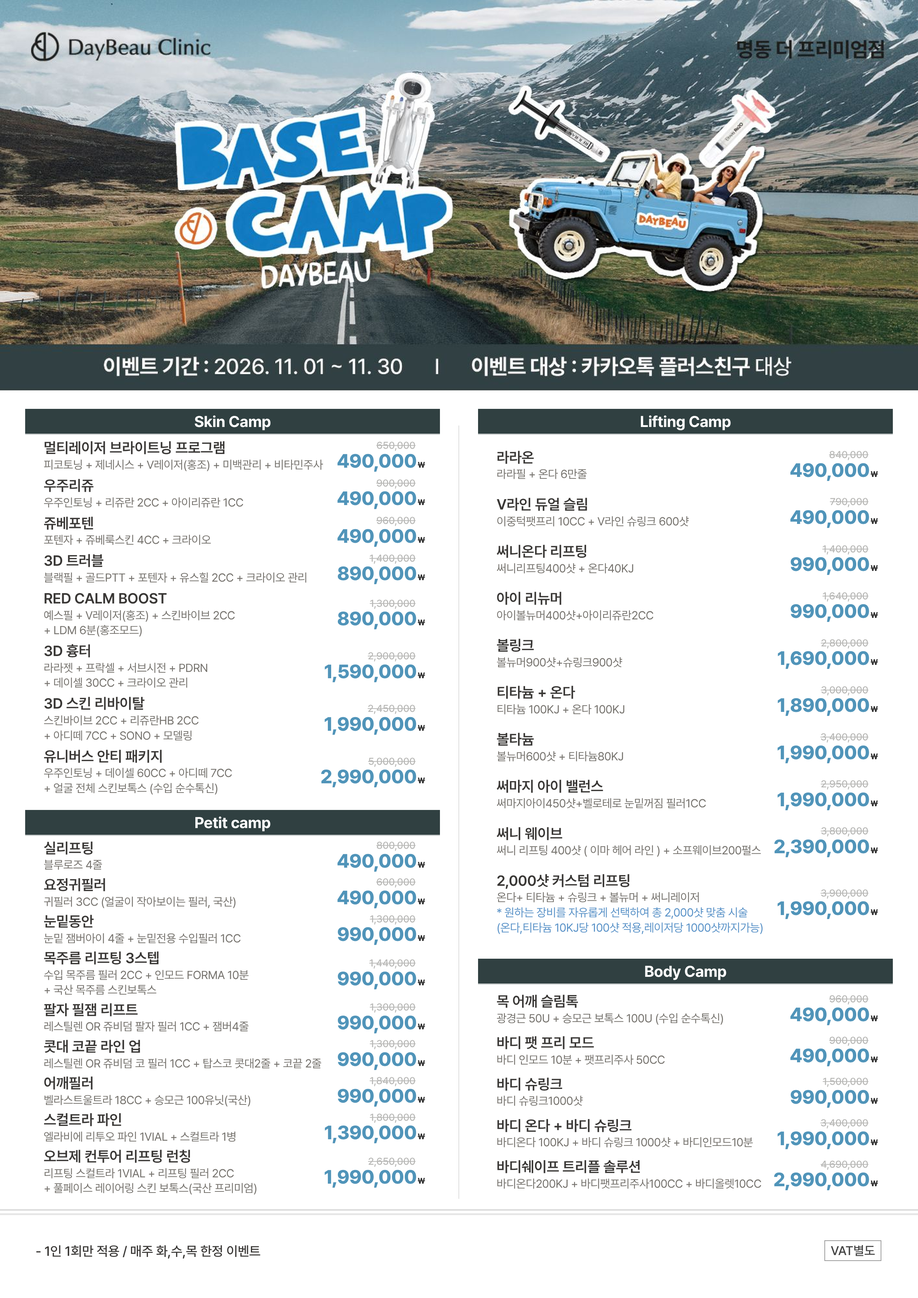
<style>
.page{position:relative;width:918px;height:1298px;background:#ffffff}
.page>*{position:absolute;margin:0}
.t1{font:15.5px "Pretendard-Bold";letter-spacing:-0.012em;color:#ffffff}
.t2{font:14.7px "Pretendard-SemiBold";letter-spacing:-0.01em;color:#3a3836}
.t3{font:10px "Pretendard-Medium";color:#b9b9b7}
.t4{font:19.2px "Pretendard-ExtraBold";letter-spacing:-0.019em;color:#5094b9}
.t5{font:8.1px "Pretendard-ExtraBold";color:#2d2d2d}
.t6{font:11.6px "Pretendard-Regular";letter-spacing:-0.019em;color:#77746f}
.t7{font:11.6px/15px "Pretendard-Regular";letter-spacing:-0.019em;color:#77746f}
.t8{font:11.6px/15px "Pretendard-Regular";letter-spacing:-0.019em;color:#5b93c8}
.t9{font:13.3px/20.7px "Pretendard-Medium";letter-spacing:-0.008em;color:#3a3836}
.t10{font:12.6px "Pretendard-Medium";color:#444444}
</style>
<div class="page">
<p class="t1" style="left:192px;top:410px;width:82px;height:23px">Skin Camp</p>
<p class="t1" style="left:638px;top:410px;width:96px;height:23px">Lifting Camp</p>
<p class="t2" style="left:41px;top:436px;width:290px;height:24px">멀티레이저 브라이트닝 프로그램</p>
<p class="t3" style="left:335px;top:438px;width:83px;height:15px">650,000</p>
<p class="t4" style="left:335px;top:449px;width:93px;height:25px">490,000<span class="t5">₩</span></p>
<p class="t2" style="left:495px;top:446px;width:289px;height:23px">라라온</p>
<p class="t3" style="left:788px;top:447px;width:83px;height:16px">840,000</p>
<p class="t6" style="left:41px;top:455px;width:290px;height:20px">피코토닝 + 제네시스 + V레이저(홍조) + 미백관리 + 비타민주사</p>
<p class="t4" style="left:788px;top:458px;width:93px;height:25px">490,000<span class="t5">₩</span></p>
<p class="t7" style="left:495px;top:465px;width:289px;height:20px">라라필 + 온다 6만줄</p>
<p class="t2" style="left:41px;top:474px;width:290px;height:23px">우주리쥬</p>
<p class="t3" style="left:335px;top:475px;width:83px;height:16px">900,000</p>
<p class="t7" style="left:41px;top:493px;width:290px;height:20px">우주인토닝 + 리쥬란 2CC + 아이리쥬란 1CC</p>
<p class="t4" style="left:335px;top:486px;width:93px;height:25px">490,000<span class="t5">₩</span></p>
<p class="t2" style="left:495px;top:493px;width:289px;height:23px">V라인 듀얼 슬림</p>
<p class="t3" style="left:788px;top:494px;width:83px;height:16px">790,000</p>
<p class="t4" style="left:788px;top:505px;width:93px;height:25px">490,000<span class="t5">₩</span></p>
<p class="t2" style="left:41px;top:512px;width:290px;height:23px">쥬베포텐</p>
<p class="t3" style="left:335px;top:513px;width:83px;height:16px">960,000</p>
<p class="t7" style="left:495px;top:512px;width:289px;height:20px">이중턱팻프리 10CC + V라인 슈링크 600샷</p>
<p class="t6" style="left:41px;top:530px;width:290px;height:20px">포텐자 + 쥬베룩스킨 4CC + 크라이오</p>
<p class="t4" style="left:335px;top:524px;width:93px;height:25px">490,000<span class="t5">₩</span></p>
<p class="t2" style="left:495px;top:540px;width:289px;height:23px">써니온다 리프팅</p>
<p class="t3" style="left:788px;top:541px;width:83px;height:16px">1,400,000</p>
<p class="t2" style="left:41px;top:549px;width:290px;height:24px">3D 트러블</p>
<p class="t3" style="left:335px;top:550px;width:83px;height:16px">1,400,000</p>
<p class="t4" style="left:788px;top:552px;width:93px;height:25px">990,000<span class="t5">₩</span></p>
<p class="t7" style="left:41px;top:568px;width:290px;height:20px">블랙필 + 골드PTT + 포텐자 + 유스힐 2CC + 크라이오 관리</p>
<p class="t4" style="left:335px;top:562px;width:93px;height:25px">890,000<span class="t5">₩</span></p>
<p class="t7" style="left:495px;top:559px;width:289px;height:20px">써니리프팅400샷 + 온다40KJ</p>
<p class="t2" style="left:41px;top:587px;width:290px;height:23px">RED CALM BOOST</p>
<p class="t2" style="left:495px;top:587px;width:289px;height:23px">아이 리뉴머</p>
<p class="t3" style="left:788px;top:588px;width:83px;height:16px">1,640,000</p>
<p class="t7" style="left:41px;top:606px;width:290px;height:34px">예스필 + V레이저(홍조) + 스킨바이브 2CC<br>+ LDM 6분(홍조모드)</p>
<p class="t3" style="left:335px;top:596px;width:83px;height:15px">1,300,000</p>
<p class="t7" style="left:495px;top:606px;width:289px;height:20px">아이볼뉴머400샷+아이리쥬란2CC</p>
<p class="t4" style="left:788px;top:599px;width:93px;height:25px">990,000<span class="t5">₩</span></p>
<p class="t4" style="left:335px;top:607px;width:93px;height:25px">890,000<span class="t5">₩</span></p>
<p class="t2" style="left:41px;top:640px;width:277px;height:23px">3D 흉터</p>
<p class="t2" style="left:495px;top:634px;width:276px;height:23px">볼링크</p>
<p class="t3" style="left:775px;top:635px;width:96px;height:16px">2,800,000</p>
<p class="t3" style="left:322px;top:648px;width:96px;height:16px">2,900,000</p>
<p class="t7" style="left:495px;top:653px;width:276px;height:20px">볼뉴머900샷+슈링크900샷</p>
<p class="t4" style="left:775px;top:646px;width:106px;height:25px">1,690,000<span class="t5">₩</span></p>
<p class="t7" style="left:41px;top:658px;width:277px;height:35px">라라젯 + 프락셀 + 서브시전 + PDRN<br>+ 데이셀 30CC + 크라이오 관리</p>
<p class="t4" style="left:322px;top:659px;width:106px;height:25px">1,590,000<span class="t5">₩</span></p>
<p class="t2" style="left:495px;top:681px;width:276px;height:23px">티타늄 + 온다</p>
<p class="t3" style="left:775px;top:682px;width:96px;height:16px">3,000,000</p>
<p class="t2" style="left:41px;top:692px;width:277px;height:24px">3D 스킨 리바이탈</p>
<p class="t3" style="left:322px;top:701px;width:96px;height:16px">2,450,000</p>
<p class="t7" style="left:495px;top:700px;width:276px;height:20px">티타늄 100KJ + 온다 100KJ</p>
<p class="t4" style="left:775px;top:693px;width:106px;height:25px">1,890,000<span class="t5">₩</span></p>
<p class="t7" style="left:41px;top:711px;width:277px;height:35px">스킨바이브 2CC + 리쥬란HB 2CC<br>+ 아디떼 7CC + SONO + 모델링</p>
<p class="t4" style="left:322px;top:712px;width:106px;height:25px">1,990,000<span class="t5">₩</span></p>
<p class="t2" style="left:495px;top:728px;width:276px;height:24px">볼타늄</p>
<p class="t3" style="left:775px;top:729px;width:96px;height:16px">3,400,000</p>
<p class="t2" style="left:41px;top:745px;width:273px;height:23px">유니버스 안티 패키지</p>
<p class="t6" style="left:495px;top:747px;width:276px;height:20px">볼뉴머600샷 + 티타늄80KJ</p>
<p class="t4" style="left:775px;top:740px;width:106px;height:25px">1,990,000<span class="t5">₩</span></p>
<p class="t3" style="left:318px;top:754px;width:100px;height:16px">5,000,000</p>
<p class="t7" style="left:41px;top:764px;width:273px;height:34px">우주인토닝 + 데이셀 60CC + 아디떼 7CC<br>+ 얼굴 전체 스킨보톡스 (수입 순수톡신)</p>
<p class="t4" style="left:318px;top:765px;width:110px;height:25px">2,990,000<span class="t5">₩</span></p>
<p class="t2" style="left:495px;top:775px;width:276px;height:24px">써마지 아이 밸런스</p>
<p class="t3" style="left:775px;top:776px;width:96px;height:16px">2,950,000</p>
<p class="t6" style="left:495px;top:794px;width:276px;height:20px">써마지아이450샷+벨로테로 눈밑꺼짐 필러1CC</p>
<p class="t4" style="left:775px;top:787px;width:106px;height:25px">1,990,000<span class="t5">₩</span></p>
<p class="t1" style="left:192px;top:811px;width:81px;height:23px">Petit camp</p>
<p class="t2" style="left:495px;top:822px;width:272px;height:24px">써니 웨이브</p>
<p class="t3" style="left:771px;top:824px;width:100px;height:15px">3,800,000</p>
<p class="t2" style="left:41px;top:837px;width:290px;height:23px">실리프팅</p>
<p class="t3" style="left:335px;top:838px;width:83px;height:16px">800,000</p>
<p class="t6" style="left:495px;top:841px;width:272px;height:20px">써니 리프팅 400샷 ( 이마 헤어 라인 ) + 소프웨이브200펄스</p>
<p class="t4" style="left:771px;top:834px;width:110px;height:25px">2,390,000<span class="t5">₩</span></p>
<p class="t7" style="left:41px;top:855px;width:290px;height:20px">블루로즈 4줄</p>
<p class="t4" style="left:335px;top:849px;width:93px;height:25px">490,000<span class="t5">₩</span></p>
<p class="t2" style="left:495px;top:869px;width:276px;height:24px">2,000샷 커스텀 리프팅</p>
<p class="t2" style="left:41px;top:873px;width:290px;height:24px">요정귀필러</p>
<p class="t3" style="left:335px;top:875px;width:83px;height:16px">600,000</p>
<p class="t7" style="left:41px;top:892px;width:290px;height:20px">귀필러 3CC (얼굴이 작아보이는 필러, 국산)</p>
<p class="t4" style="left:335px;top:886px;width:93px;height:25px">490,000<span class="t5">₩</span></p>
<p class="t6" style="left:495px;top:888px;width:276px;height:20px">온다+ 티타늄 + 슈링크 + 볼뉴머 + 써니레이저</p>
<p class="t3" style="left:775px;top:885px;width:96px;height:16px">3,900,000</p>
<p class="t8" style="left:495px;top:903px;width:276px;height:35px">* 원하는 장비를 자유롭게 선택하여 총 2,000샷 맞춤 시술<br>(온다,티타늄 10KJ당 100샷 적용,레이저당 1000샷까지가능)</p>
<p class="t4" style="left:775px;top:896px;width:106px;height:26px">1,990,000<span class="t5">₩</span></p>
<p class="t2" style="left:41px;top:910px;width:290px;height:24px">눈밑동안</p>
<p class="t3" style="left:335px;top:911px;width:83px;height:16px">1,300,000</p>
<p class="t7" style="left:41px;top:929px;width:290px;height:20px">눈밑 잼버아이 4줄 + 눈밑전용 수입필러 1CC</p>
<p class="t4" style="left:335px;top:922px;width:93px;height:25px">990,000<span class="t5">₩</span></p>
<p class="t2" style="left:41px;top:947px;width:290px;height:23px">목주름 리프팅 3스텝</p>
<p class="t7" style="left:41px;top:965px;width:290px;height:35px">수입 목주름 필러 2CC + 인모드 FORMA 10분<br>+ 국산 목주름 스킨보톡스</p>
<p class="t3" style="left:335px;top:955px;width:83px;height:16px">1,440,000</p>
<p class="t1" style="left:642px;top:960px;width:87px;height:23px">Body Camp</p>
<p class="t4" style="left:335px;top:966px;width:93px;height:26px">990,000<span class="t5">₩</span></p>
<p class="t2" style="left:41px;top:998px;width:290px;height:24px">팔자 필잼 리프트</p>
<p class="t3" style="left:335px;top:1000px;width:83px;height:15px">1,300,000</p>
<p class="t2" style="left:495px;top:990px;width:289px;height:24px">목 어깨 슬림톡</p>
<p class="t3" style="left:788px;top:991px;width:83px;height:16px">960,000</p>
<p class="t4" style="left:335px;top:1011px;width:93px;height:25px">990,000<span class="t5">₩</span></p>
<p class="t6" style="left:495px;top:1009px;width:289px;height:20px">광경근 50U + 승모근 보톡스 100U (수입 순수톡신)</p>
<p class="t4" style="left:788px;top:1002px;width:93px;height:26px">490,000<span class="t5">₩</span></p>
<p class="t7" style="left:41px;top:1017px;width:290px;height:20px">레스틸렌 OR 쥬비덤 팔자 필러 1CC + 잼버4줄</p>
<p class="t2" style="left:41px;top:1035px;width:290px;height:24px">콧대 코끝 라인 업</p>
<p class="t3" style="left:335px;top:1036px;width:83px;height:16px">1,300,000</p>
<p class="t2" style="left:495px;top:1032px;width:289px;height:23px">바디 팻 프리 모드</p>
<p class="t3" style="left:788px;top:1033px;width:83px;height:16px">900,000</p>
<p class="t4" style="left:335px;top:1048px;width:93px;height:24px">990,000<span class="t5">₩</span></p>
<p class="t4" style="left:788px;top:1044px;width:93px;height:25px">490,000<span class="t5">₩</span></p>
<p class="t7" style="left:41px;top:1054px;width:290px;height:20px">레스틸렌 OR 쥬비덤 코 필러 1CC + 탑스코 콧대2줄 + 코끝 2줄</p>
<p class="t7" style="left:495px;top:1050px;width:289px;height:20px">바디 인모드 10분 + 팻프리주사 50CC</p>
<p class="t2" style="left:41px;top:1072px;width:290px;height:23px">어깨필러</p>
<p class="t3" style="left:335px;top:1073px;width:83px;height:16px">1,840,000</p>
<p class="t2" style="left:495px;top:1073px;width:289px;height:23px">바디 슈링크</p>
<p class="t4" style="left:335px;top:1084px;width:93px;height:25px">990,000<span class="t5">₩</span></p>
<p class="t3" style="left:788px;top:1074px;width:83px;height:16px">1,500,000</p>
<p class="t4" style="left:788px;top:1085px;width:93px;height:25px">990,000<span class="t5">₩</span></p>
<p class="t7" style="left:41px;top:1090px;width:290px;height:20px">벨라스트울트라 18CC + 승모근 100유닛(국산)</p>
<p class="t7" style="left:495px;top:1092px;width:289px;height:20px">바디 슈링크1000샷</p>
<p class="t2" style="left:41px;top:1109px;width:277px;height:23px">스컬트라 파인</p>
<p class="t3" style="left:322px;top:1110px;width:96px;height:16px">1,800,000</p>
<p class="t4" style="left:322px;top:1121px;width:106px;height:25px">1,390,000<span class="t5">₩</span></p>
<p class="t2" style="left:495px;top:1114px;width:276px;height:24px">바디 온다 + 바디 슈링크</p>
<p class="t3" style="left:775px;top:1116px;width:96px;height:15px">3,400,000</p>
<p class="t7" style="left:41px;top:1127px;width:277px;height:20px">엘라비에 리투오 파인 1VIAL + 스컬트라 1병</p>
<p class="t6" style="left:495px;top:1133px;width:276px;height:20px">바디온다 100KJ + 바디 슈링크 1000샷 + 바디인모드10분</p>
<p class="t4" style="left:775px;top:1126px;width:106px;height:26px">1,990,000<span class="t5">₩</span></p>
<p class="t2" style="left:41px;top:1145px;width:277px;height:24px">오브제 컨투어 리프팅 런칭</p>
<p class="t3" style="left:322px;top:1154px;width:96px;height:16px">2,650,000</p>
<p class="t2" style="left:495px;top:1156px;width:272px;height:23px">바디쉐이프 트리플 솔루션</p>
<p class="t3" style="left:771px;top:1157px;width:100px;height:16px">4,690,000</p>
<p class="t7" style="left:41px;top:1164px;width:277px;height:35px">리프팅 스컬트라 1VIAL + 리프팅 필러 2CC<br>+ 풀페이스 레이어링 스킨 보톡스(국산 프리미엄)</p>
<p class="t4" style="left:322px;top:1165px;width:106px;height:25px">1,990,000<span class="t5">₩</span></p>
<p class="t4" style="left:771px;top:1168px;width:110px;height:25px">2,990,000<span class="t5">₩</span></p>
<p class="t7" style="left:495px;top:1174px;width:272px;height:20px">바디온다200KJ + 바디팻프리주사100CC + 바디올렛10CC</p>
<p class="t9" style="left:33px;top:1239px;width:230px;height:25px">- 1인 1회만 적용 / 매주 화,수,목 한정 이벤트</p>
<p class="t10" style="left:828px;top:1241px;width:50px;height:20px">VAT별도</p>
</div>
